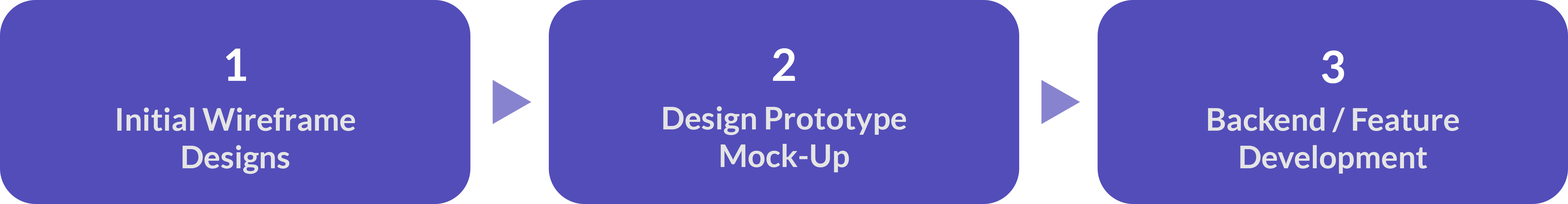
<style>
.page{position:relative;width:1568px;height:204px;background:#534db9}
.page>*{position:absolute;margin:0}
.t1{font:44.2px "Lato-Bold";color:#ffffff}
.t2{font:31.4px "Lato-Bold";color:#e4e4e4}
</style>
<div class="page">
<p class="t1" style="left:226px;top:49px;width:20px;height:32px">1</p>
<p class="t1" style="left:773px;top:48px;width:22px;height:33px">2</p>
<p class="t1" style="left:1322px;top:50px;width:22px;height:33px">3</p>
<p class="t2" style="left:117px;top:108px;width:238px;height:66px;text-align:center">Initial Wireframe<br>Designs</p>
<p class="t2" style="left:663px;top:106px;width:243px;height:66px;text-align:center">Design Prototype<br>Mock-Up</p>
<p class="t2" style="left:1208px;top:108px;width:251px;height:66px;text-align:center">Backend / Feature<br>Development</p>
</div>
